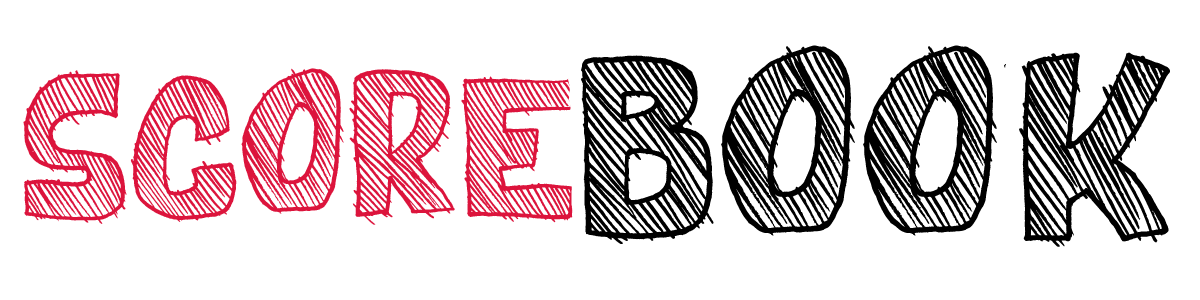
<style>
.page{position:relative;width:1200px;height:300px;background:#ffffff}
.page>*{position:absolute;margin:0}
.t1{font:110.4px "BestPrices";color:#000000}
.t2{font:84.3px "BestPrices";color:#dc143c}
</style>
<div class="page">
<p class="t1" style="left:581px;top:45px;width:589px;height:202px">BOOK</p>
<p class="t2" style="left:23px;top:68px;width:553px;height:157px">SCORE</p>
</div>
